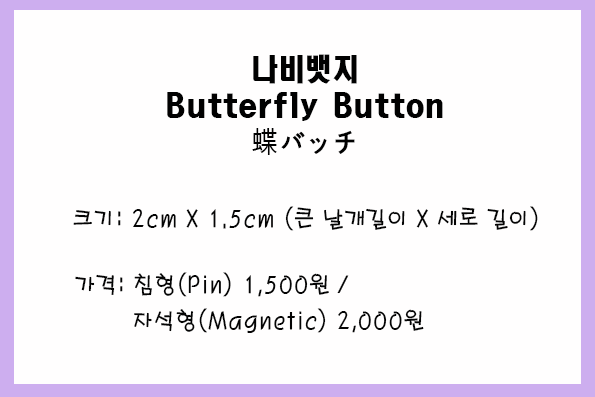
<style>
.page{position:relative;width:595px;height:397px;background:#fffefe}
.page>*{position:absolute;margin:0}
.t1{font:30px/36px "HeadlineR-HM";color:#010101;scale:0.9 1}
.t2{font:30px/36px "MalgunGothic";color:#010101;scale:0.9 1}
.t3{font:24px "H2porM";color:#040404;scale:0.9 1}
.t4{font:24px/36px "H2porM";color:#040404;scale:0.9 1}
</style>
<div class="page">
<p class="t1" style="left:167px;top:54px;width:276px;height:101px;text-align:center">나비뱃지<br>Butterfly Button<br><span class="t2">蝶</span>バッチ</p>
<p class="t3" style="left:73px;top:206px;width:465px;height:25px">크기: 2cm X 1.5cm (큰 날개길이 X 세로 길이)</p>
<p class="t4" style="left:75px;top:272px;width:349px;height:61px">가격: 침형(Pin) 1,500원 / <br>        자석형(Magnetic) 2,000원</p>
</div>
